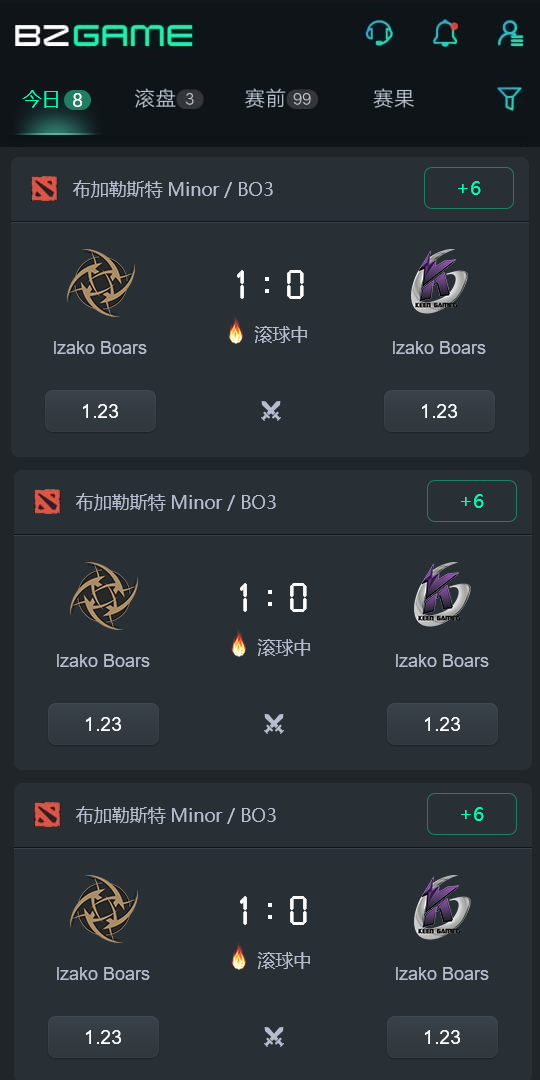
<style>
.page{position:relative;width:540px;height:1080px;background:#282f35}
.page>*{position:absolute;margin:0}
.t1{font:19.2px "MicrosoftYaHei";color:#03fcb3}
.t2{font:19.5px "ArialMT";color:#ffffff}
.t3{font:18px "MicrosoftYaHei";color:#b5bdce}
.t4{font:36px "LiquidCrystal-Regular";color:#ffffff}
.t5{font:18px "ArialMT";color:#b5bdce}
.t6{font:19.2px "ArialMT";color:#ffffff}
</style>
<div class="page">
<p class="t1" style="left:22px;top:90px;width:36px;height:18px">今日</p>
<p class="t2" style="left:73px;top:93px;width:9px;height:14px">8</p>
<p class="t3" style="left:73px;top:180px;width:200px;height:18px">布加勒斯特Minor / BO3</p>
<p class="t1" style="left:458px;top:181px;width:23px;height:14px">+6</p>
<p class="t4" style="left:237px;top:270px;width:7px;height:29px">1</p>
<p class="t4" style="left:287px;top:270px;width:17px;height:29px">0</p>
<p class="t3" style="left:254px;top:326px;width:53px;height:17px">滚球中</p>
<p class="t5" style="left:54px;top:341px;width:93px;height:13px">lzako Boars</p>
<p class="t5" style="left:393px;top:341px;width:93px;height:13px">lzako Boars</p>
<p class="t6" style="left:83px;top:404px;width:35px;height:14px">1.23</p>
<p class="t6" style="left:422px;top:404px;width:35px;height:14px">1.23</p>
<p class="t3" style="left:76px;top:493px;width:200px;height:18px">布加勒斯特Minor / BO3</p>
<p class="t1" style="left:461px;top:494px;width:23px;height:14px">+6</p>
<p class="t4" style="left:240px;top:583px;width:7px;height:29px">1</p>
<p class="t4" style="left:290px;top:583px;width:17px;height:29px">0</p>
<p class="t3" style="left:257px;top:639px;width:53px;height:17px">滚球中</p>
<p class="t5" style="left:57px;top:654px;width:93px;height:13px">lzako Boars</p>
<p class="t5" style="left:396px;top:654px;width:93px;height:13px">lzako Boars</p>
<p class="t6" style="left:86px;top:717px;width:35px;height:14px">1.23</p>
<p class="t6" style="left:425px;top:717px;width:35px;height:14px">1.23</p>
<p class="t3" style="left:76px;top:806px;width:200px;height:18px">布加勒斯特Minor / BO3</p>
<p class="t1" style="left:461px;top:807px;width:23px;height:14px">+6</p>
<p class="t4" style="left:240px;top:896px;width:7px;height:29px">1</p>
<p class="t4" style="left:290px;top:896px;width:17px;height:29px">0</p>
<p class="t3" style="left:257px;top:952px;width:53px;height:17px">滚球中</p>
<p class="t5" style="left:57px;top:967px;width:93px;height:13px">lzako Boars</p>
<p class="t5" style="left:396px;top:967px;width:93px;height:13px">lzako Boars</p>
<p class="t6" style="left:86px;top:1030px;width:35px;height:14px">1.23</p>
<p class="t6" style="left:425px;top:1030px;width:35px;height:14px">1.23</p>
</div>
